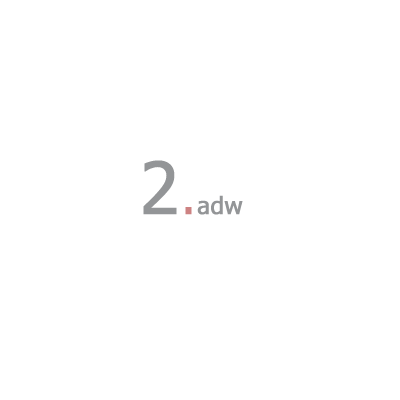
<style>
.page{position:relative;width:400px;height:400px;background:#ffffff}
.page>*{position:absolute;margin:0}
.t1{font:24px "Tahoma";color:#939597;font-weight:bold}
.t2{font:72px "Tahoma";color:#939597;font-weight:bold}
.t3{font:48px "Tahoma";color:#939597;font-weight:bold}
</style>
<div class="page">
<p class="t1" style="left:143px;top:160px;width:100px;height:55px"><span class="t2">2</span><span class="t3">.</span>adw</p>
</div>
